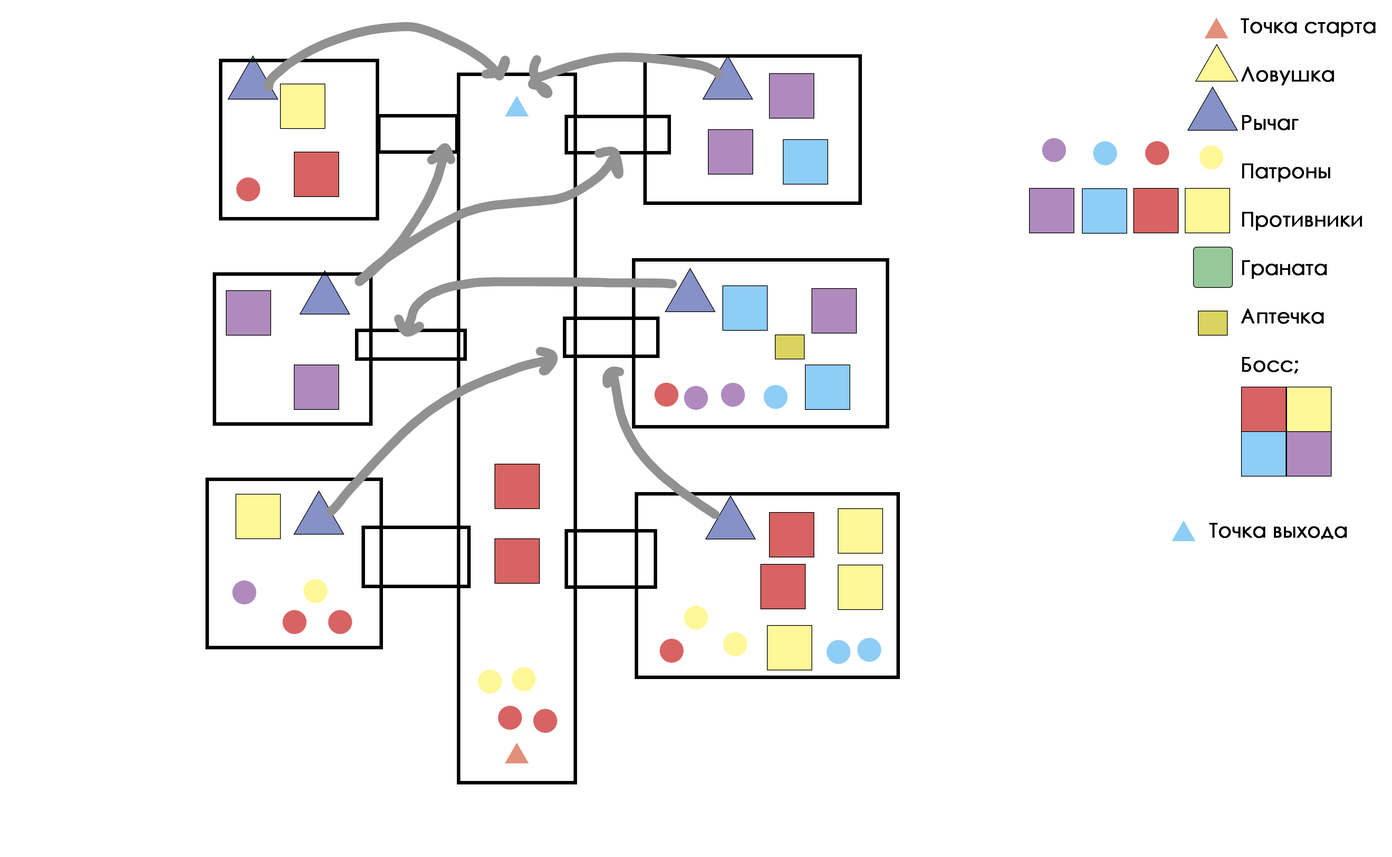
<style>
.page{position:relative;width:1392px;height:857px;background:#ffffff}
.page>*{position:absolute;margin:0}
.t1{font:20.1px "CenturyGothic";color:#000000;font-weight:bold}
</style>
<div class="page">
<p class="t1" style="left:1241px;top:18px;width:135px;height:355px">Точка старта<br><br>Ловушка<br><br>Рычаг<br><br>Патроны<br><br>Противники <br><br>Граната<br><br>Аптечка<br><br>Босс;</p>
<p class="t1" style="left:1209px;top:523px;width:138px;height:16px">Точка выхода</p>
</div>
